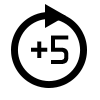
<style>
.page{position:relative;width:100px;height:100px;background:#ffffff}
.page>*{position:absolute;margin:0}
.t1{font:41.7px "AeroMaticsDisplayRegular";color:#000000}
</style>
<div class="page">
<p class="t1" style="left:31px;top:35px;width:38px;height:29px">+5</p>
</div>
